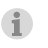
<style>
.page{position:relative;width:48px;height:48px;background:#ffffff}
.page>*{position:absolute;margin:0}
.t1{font:36px "ChaparralPro-Bold";color:#888888}
</style>
<div class="page">
<p class="t1" style="left:11px;top:11px;width:11px;height:25px">i</p>
</div>
